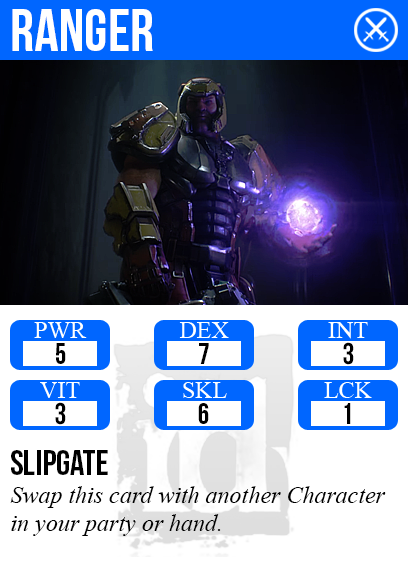
<style>
.page{position:relative;width:408px;height:585px;background:#ffffff}
.page>*{position:absolute;margin:0}
.t1{font:60px "BebasNeue";color:#ffffff}
.t2{font:29.9px "BebasNeue";color:#000000}
.t3{font:36px "BebasNeue";color:#000000}
.t4{font:24px "TimesNewRomanPS-ItalicMT";color:#000000}
</style>
<div class="page">
<p class="t1" style="left:12px;top:9px;width:141px;height:42px">ranger</p>
<p class="t2" style="left:343px;top:342px;width:11px;height:23px">3</p>
<p class="t2" style="left:56px;top:343px;width:10px;height:21px">5</p>
<p class="t2" style="left:199px;top:343px;width:10px;height:21px">7</p>
<p class="t2" style="left:55px;top:402px;width:11px;height:23px">3</p>
<p class="t2" style="left:198px;top:403px;width:11px;height:21px">6</p>
<p class="t2" style="left:344px;top:403px;width:7px;height:21px">1</p>
<p class="t3" style="left:11px;top:450px;width:97px;height:25px">Slipgate</p>
<p class="t4" style="left:10px;top:486px;width:376px;height:50px">Swap this card with another Character<br>in your party or hand.</p>
</div>
